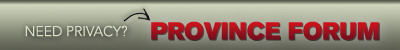
<style>
.page{position:relative;width:400px;height:50px}
.page>*{position:absolute;margin:0}
.t1{font:14px "AvenirLTStd-Light";color:#dbe1c7;text-transform:uppercase}
.t2{font:24px "AkzidenzGroteskBQ-Super";text-transform:uppercase}
</style>
<div class="page">
<p class="t1" style="left:25px;top:25px;width:102px;height:12px">Need Privacy?</p>
<p class="t2" style="left:151px;top:21px;width:228px;height:19px">Province forum</p>
</div>
